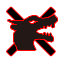
<style>
.page{position:relative;width:64px;height:64px;background:#ffffff}
.page>*{position:absolute;margin:0}
.t1{font:56.8px "DFPPOP1-SB-WINP-RKSJ-H"}
</style>
<div class="page">
<p class="t1" style="left:7px;top:7px;width:48px;height:49px">×</p>
</div>
